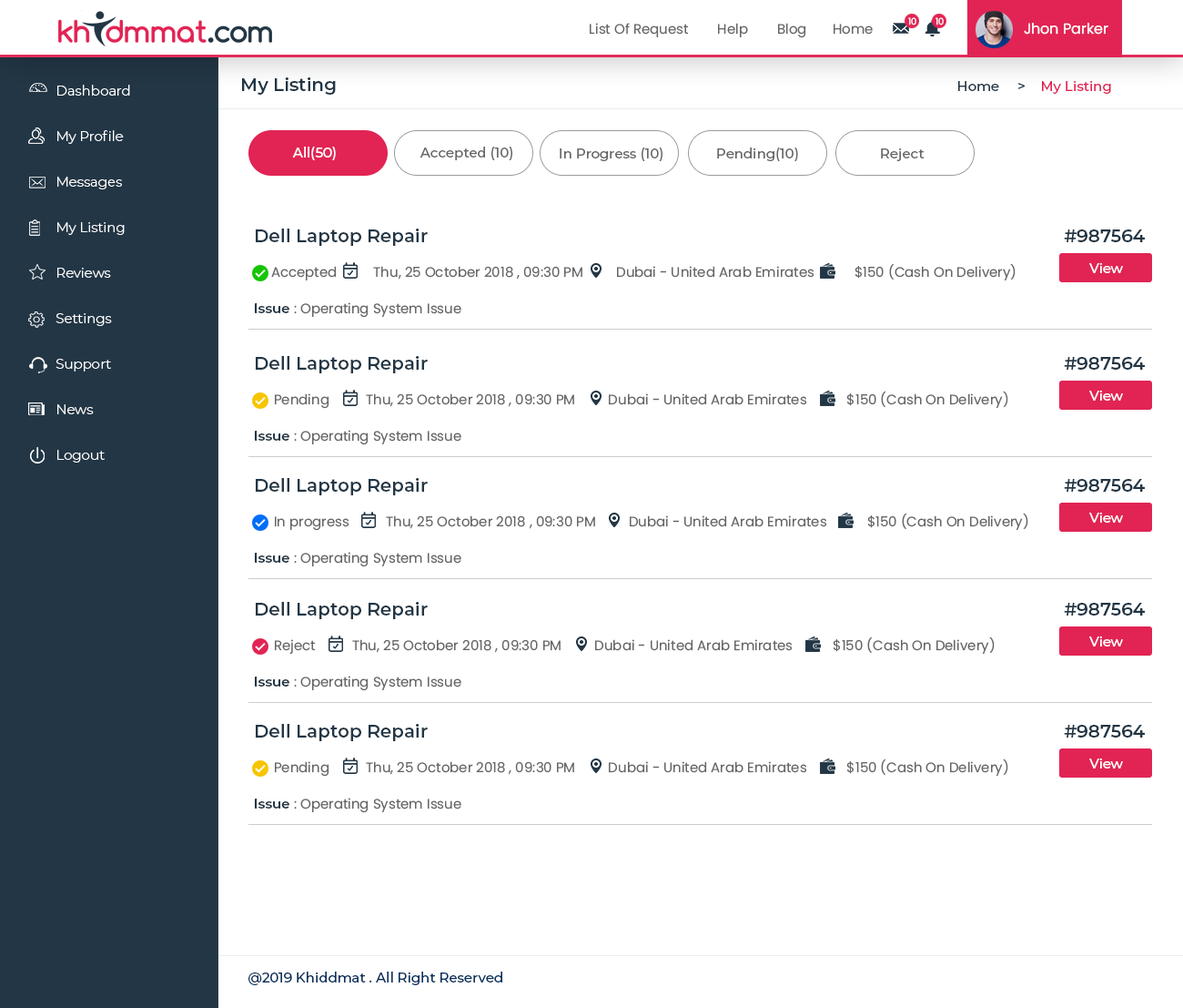
<style>
.page{position:relative;width:1183px;height:1008px;background:#ffffff}
.page>*{position:absolute;margin:0}
.t1{font:9.1px "Poppins-Regular";color:#ffffff}
.t2{font:13.7px "Poppins-Regular";color:#666666}
.t3{font:12.7px "Poppins-Regular";color:#666666}
.t4{font:14.6px "Poppins-Regular";color:#ffffff}
.t5{font:18.2px "Montserrat-SemiBold";color:#223645}
.t6{font:13.7px/45.5px "Montserrat-Light";color:#ffffff}
.t7{font:13.7px "Montserrat-Medium";color:#223645}
.t8{font:13.7px "Montserrat-Medium";color:#05315e}
.t9{font:13.7px "Montserrat-Medium";color:#e12454}
.t10{font:13.7px "Montserrat-Medium";color:#ffffff}
.t11{font:13.7px "Montserrat-Medium";color:#666666}
.t12{font:13.7px "Montserrat-SemiBold";color:#223645}
</style>
<div class="page">
<p class="t1" style="left:908px;top:17px;width:9px;height:8px">10</p>
<p class="t1" style="left:936px;top:17px;width:8px;height:8px">10</p>
<p class="t2" style="left:590px;top:23px;width:519px;height:15px"><span class="t3">       </span>  List Of Request        Help        Blog       Home                                          <span class="t4">Jhon Parker</span></p>
<p class="t5" style="left:242px;top:77px;width:94px;height:18px">My Listing</p>
<p class="t6" style="left:56px;top:85px;width:74px;height:377px">Dashboard<br>My Profile<br>Messages<br>My Listing<br>Reviews<br>Settings<br>Support<br>News<br>Logout</p>
<p class="t7" style="left:959px;top:80px;width:152px;height:14px"><span class="t8">    </span>Home     &gt;    <span class="t9">My Listing</span></p>
<p class="t10" style="left:292px;top:147px;width:44px;height:13px">All(50)</p>
<p class="t11" style="left:420px;top:147px;width:92px;height:13px">Accepted (10)</p>
<p class="t11" style="left:560px;top:147px;width:103px;height:14px">In Progress (10)</p>
<p class="t11" style="left:717px;top:147px;width:81px;height:14px">Pending(10)</p>
<p class="t11" style="left:881px;top:147px;width:44px;height:14px">Reject</p>
<p class="t5" style="left:256px;top:228px;width:172px;height:18px">Dell Laptop Repair</p>
<p class="t5" style="left:1064px;top:229px;width:81px;height:13px">#987564</p>
<p class="t2" style="left:271px;top:263px;width:745px;height:17px">Accepted          Thu, 25 October 2018 , 09:30 PM         Dubai - United Arab Emirates           $150 (Cash On Delivery)</p>
<p class="t10" style="left:1090px;top:262px;width:33px;height:11px">View</p>
<p class="t2" style="left:255px;top:302px;width:207px;height:16px"><span class="t12">Issue </span>: Operating System Issue</p>
<p class="t5" style="left:256px;top:356px;width:172px;height:17px">Dell Laptop Repair</p>
<p class="t5" style="left:1064px;top:357px;width:81px;height:13px">#987564</p>
<p class="t10" style="left:1090px;top:390px;width:33px;height:11px">View</p>
<p class="t2" style="left:275px;top:391px;width:734px;height:18px">Pending          Thu, 25 October 2018 , 09:30 PM         Dubai - United Arab Emirates           $150 (Cash On Delivery)</p>
<p class="t2" style="left:255px;top:430px;width:207px;height:15px"><span class="t12">Issue </span>: Operating System Issue</p>
<p class="t5" style="left:256px;top:478px;width:172px;height:17px">Dell Laptop Repair</p>
<p class="t5" style="left:1064px;top:479px;width:81px;height:13px">#987564</p>
<p class="t2" style="left:275px;top:512px;width:754px;height:19px">In progress          Thu, 25 October 2018 , 09:30 PM         Dubai - United Arab Emirates           $150 (Cash On Delivery)</p>
<p class="t10" style="left:1090px;top:512px;width:33px;height:10px">View</p>
<p class="t2" style="left:255px;top:552px;width:207px;height:15px"><span class="t12">Issue </span>: Operating System Issue</p>
<p class="t5" style="left:256px;top:602px;width:172px;height:17px">Dell Laptop Repair</p>
<p class="t5" style="left:1064px;top:603px;width:81px;height:12px">#987564</p>
<p class="t2" style="left:275px;top:636px;width:720px;height:18px">Reject          Thu, 25 October 2018 , 09:30 PM         Dubai - United Arab Emirates           $150 (Cash On Delivery)</p>
<p class="t10" style="left:1090px;top:635px;width:33px;height:11px">View</p>
<p class="t2" style="left:255px;top:675px;width:207px;height:16px"><span class="t12">Issue </span>: Operating System Issue</p>
<p class="t5" style="left:256px;top:724px;width:172px;height:17px">Dell Laptop Repair</p>
<p class="t5" style="left:1064px;top:725px;width:81px;height:12px">#987564</p>
<p class="t2" style="left:275px;top:758px;width:734px;height:18px">Pending          Thu, 25 October 2018 , 09:30 PM         Dubai - United Arab Emirates           $150 (Cash On Delivery)</p>
<p class="t10" style="left:1090px;top:757px;width:33px;height:11px">View</p>
<p class="t2" style="left:255px;top:797px;width:207px;height:16px"><span class="t12">Issue </span>: Operating System Issue</p>
<p class="t8" style="left:249px;top:971px;width:253px;height:14px">@2019 Khiddmat . All Right Reserved</p>
</div>
